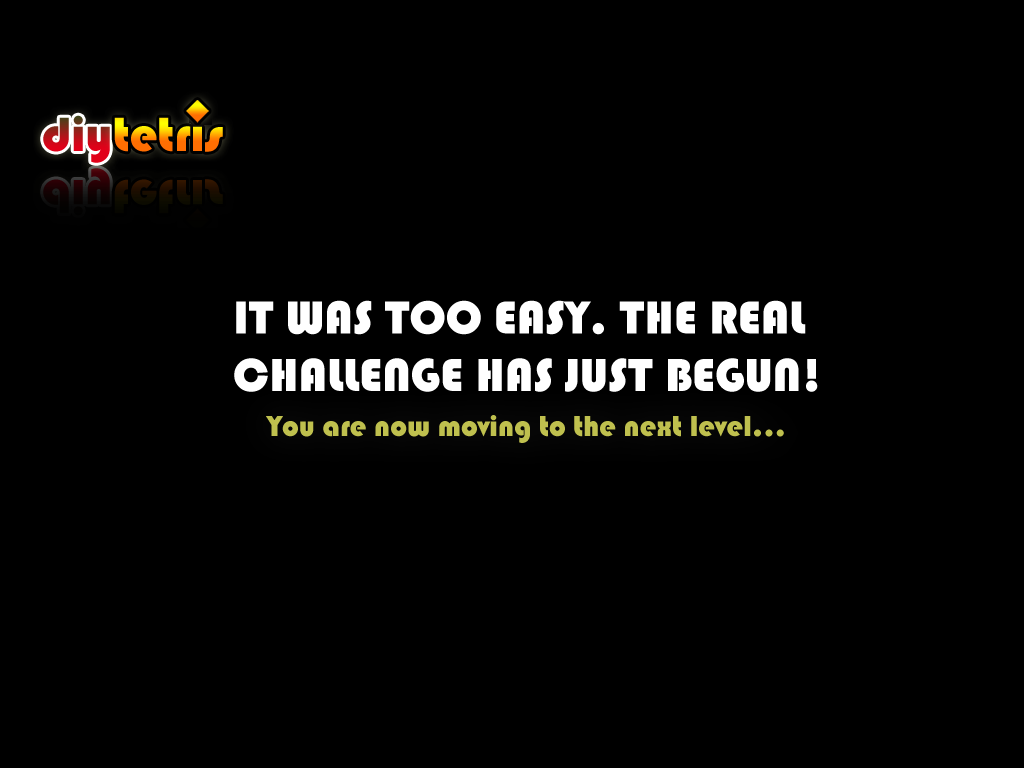
<style>
.page{position:relative;width:1024px;height:768px;background:#000000}
.page>*{position:absolute;margin:0}
.t1{font:48px "Bauhaus93";color:#ffffff}
.t2{font:30px "Bauhaus93";color:#bfc04e}
</style>
<div class="page">
<p class="t1" style="left:234px;top:300px;width:584px;height:92px">IT WAS TOO EASY. THE REAL <br>CHALLENGE HAS JUST BEGUN!</p>
<p class="t2" style="left:266px;top:415px;width:518px;height:28px">You are now moving to the next level...</p>
</div>
